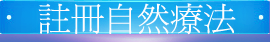
<style>
.page{position:relative;width:270px;height:42px}
.page>*{position:absolute;margin:0}
.t1{font:33px "MingLiU";color:#fffcfc}
</style>
<div class="page">
<p class="t1" style="left:38px;top:3px;width:198px;height:32px">註冊自然療法</p>
</div>
